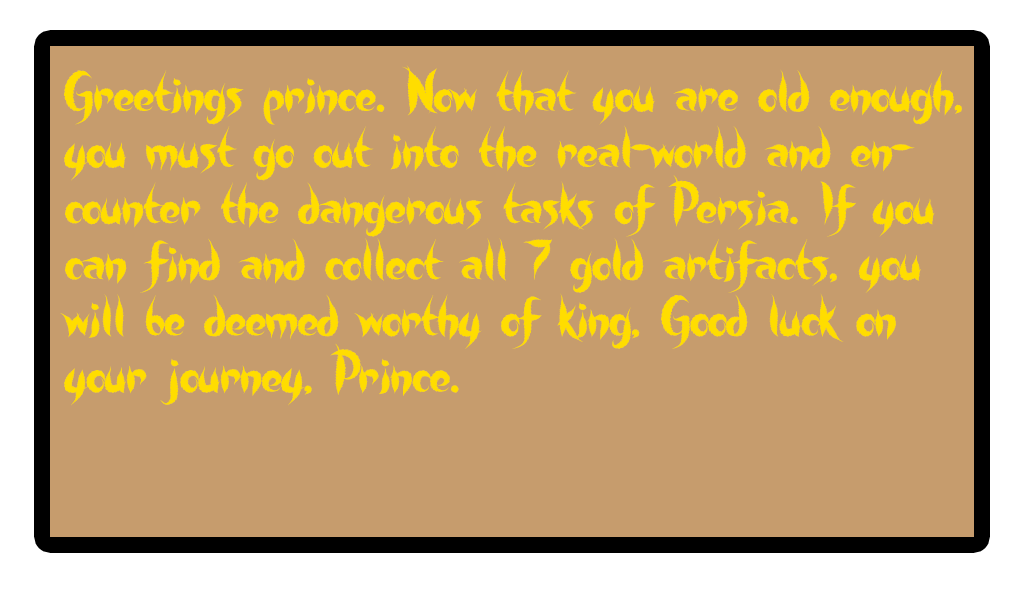
<style>
.page{position:relative;width:1025px;height:592px;background:#c69c6d}
.page>*{position:absolute;margin:0}
.t1{font:46.8px "SweetLeaf";color:#ffdd00}
</style>
<div class="page">
<p class="t1" style="left:60px;top:65px;width:902px;height:341px">Greetings prince. Now that you are old enough, you must go out into the real-world and encounter the dangerous tasks of Persia. If you can find and collect all 7 gold artifacts, you will be deemed worthy of king, Good luck on your journey, Prince.</p>
</div>
